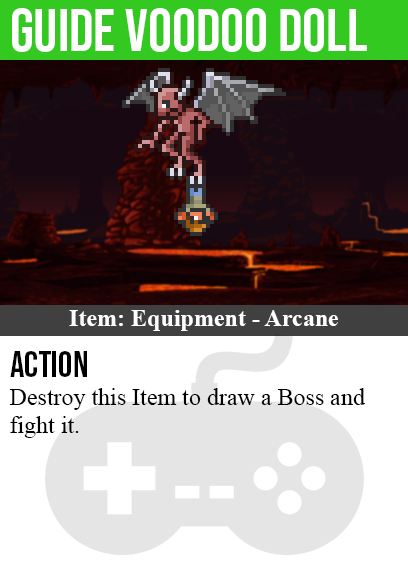
<style>
.page{position:relative;width:408px;height:585px;background:#ffffff}
.page>*{position:absolute;margin:0}
.t1{font:60px "BebasNeue-Regular";color:#ffffff}
.t2{font:24px "TimesNewRomanPS-BoldMT";color:#ffffff}
.t3{font:36px "BebasNeue-Regular";color:#000000}
.t4{font:24px "TimesNewRomanPSMT";color:#000000}
</style>
<div class="page">
<p class="t1" style="left:12px;top:8px;width:355px;height:44px">guide voodoo doll</p>
<p class="t2" style="left:69px;top:310px;width:269px;height:21px">Item: Equipment - Arcane</p>
<p class="t3" style="left:10px;top:351px;width:77px;height:26px">action</p>
<p class="t4" style="left:9px;top:388px;width:356px;height:50px">Destroy this Item to draw a Boss and<br>fight it.</p>
</div>
